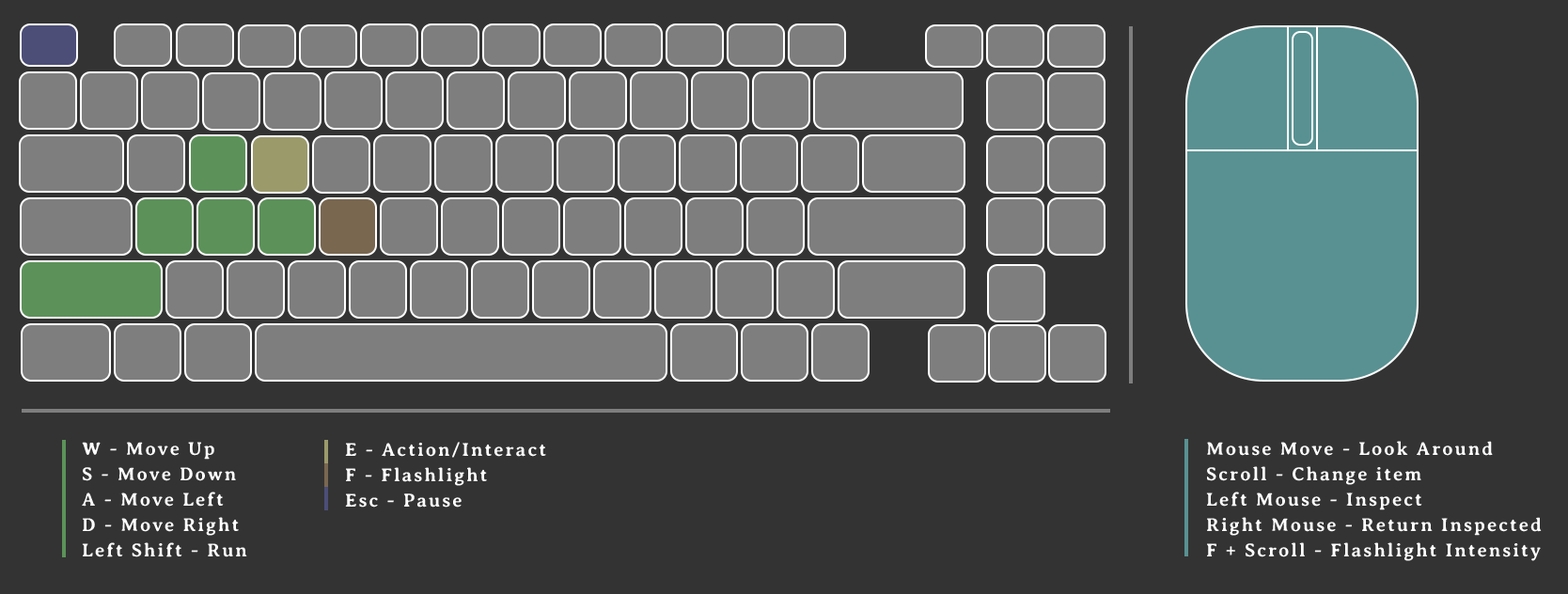
<style>
.page{position:relative;width:1568px;height:594px;background:#333333}
.page>*{position:absolute;margin:0}
.t1{font:18.8px/25.4px "AveriaSerifGWF-Bold";letter-spacing:0.1em;color:#ffffff}
</style>
<div class="page">
<p class="t1" style="left:82px;top:442px;width:165px;height:115px">W - Move Up<br>S - Move Down<br>A - Move Left<br>D - Move Right<br>Left Shift - Run</p>
<p class="t1" style="left:345px;top:442px;width:201px;height:66px">E - Action/Interact<br>F - Flashlight<br>Esc - Pause</p>
<p class="t1" style="left:1206px;top:441px;width:336px;height:120px">Mouse Move - Look Around<br>Scroll - Change item<br>Left Mouse - Inspect<br>Right Mouse - Return Inspected<br>F + Scroll - Flashlight Intensity</p>
</div>
